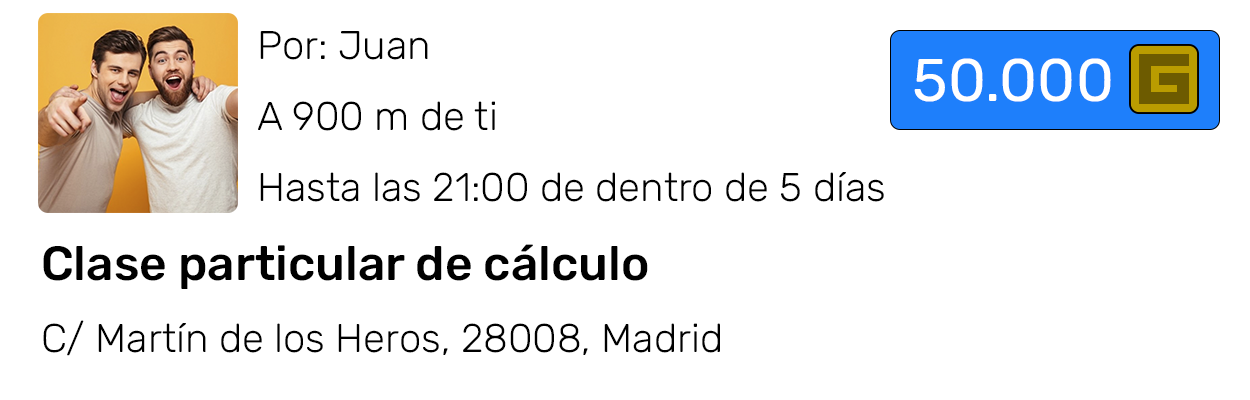
<style>
.page{position:relative;width:1250px;height:400px;background:#ffffff}
.page>*{position:absolute;margin:0}
.t1{font:40px "Rubik-Light";color:#000000}
.t2{font:10px "Roboto-Regular";color:#000000}
.t3{font:48px "Rubik-Medium";color:#000000}
.t4{font:60px "Rubik-Regular";color:#ffffff}
</style>
<div class="page">
<p class="t1" style="left:43px;top:31px;width:841px;height:325px"><span class="t2">      </span>Por: Juan<br><br><br>      A 900 m de ti<br><br><br>      Hasta las 21:00 de dentro de 5 días<br><br><br><span class="t3">Clase particular de cálculo<br><br></span>C/ Martín de los Heros, 28008, Madrid</p>
<p class="t4" style="left:914px;top:58px;width:197px;height:44px">50.000</p>
</div>
